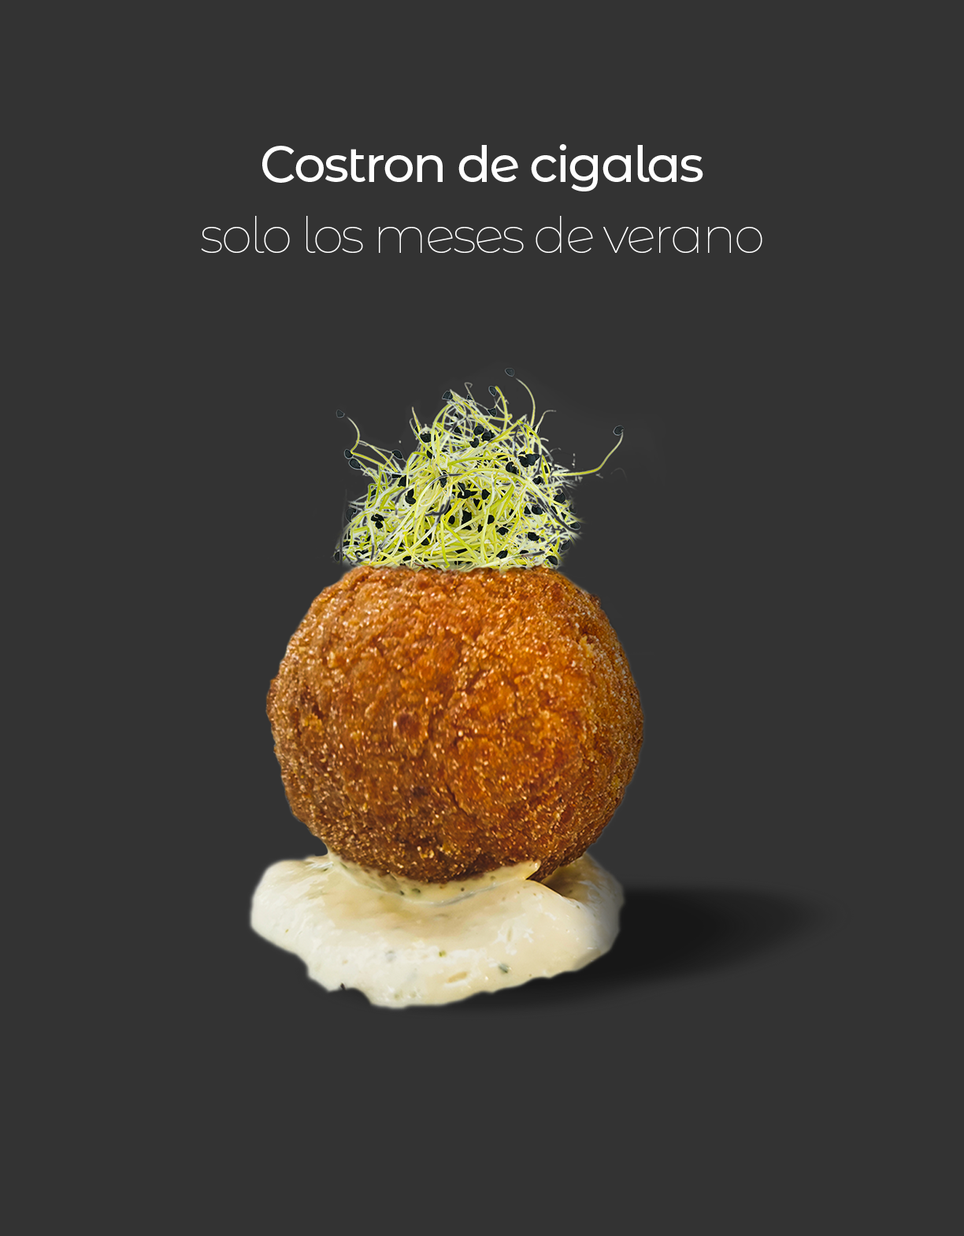
<style>
.page{position:relative;width:964px;height:1236px;background:#333333}
.page>*{position:absolute;margin:0}
.t1{font:50.4px/70.9px "MontserratAlternates-Thin";letter-spacing:-0.04em;color:#ffffff}
.t2{font:50.4px/70.9px "MontserratAlternates-Medium";letter-spacing:-0.04em;color:#ffffff}
</style>
<div class="page">
<p class="t1" style="left:201px;top:144px;width:562px;height:109px;text-align:center"><span class="t2">Costron de cigalas<br></span>solo los meses de verano</p>
</div>
